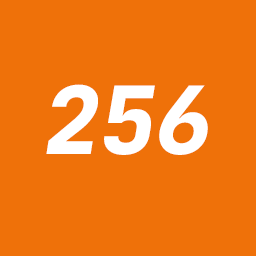
<style>
.page{position:relative;width:256px;height:256px;background:#ef7109}
.page>*{position:absolute;margin:0}
.t1{font:93.7px "JetBrainsMono-ExtraBoldItalic";color:#ffffff}
</style>
<div class="page">
<p class="t1" style="left:46px;top:84px;width:162px;height:71px">256</p>
</div>
